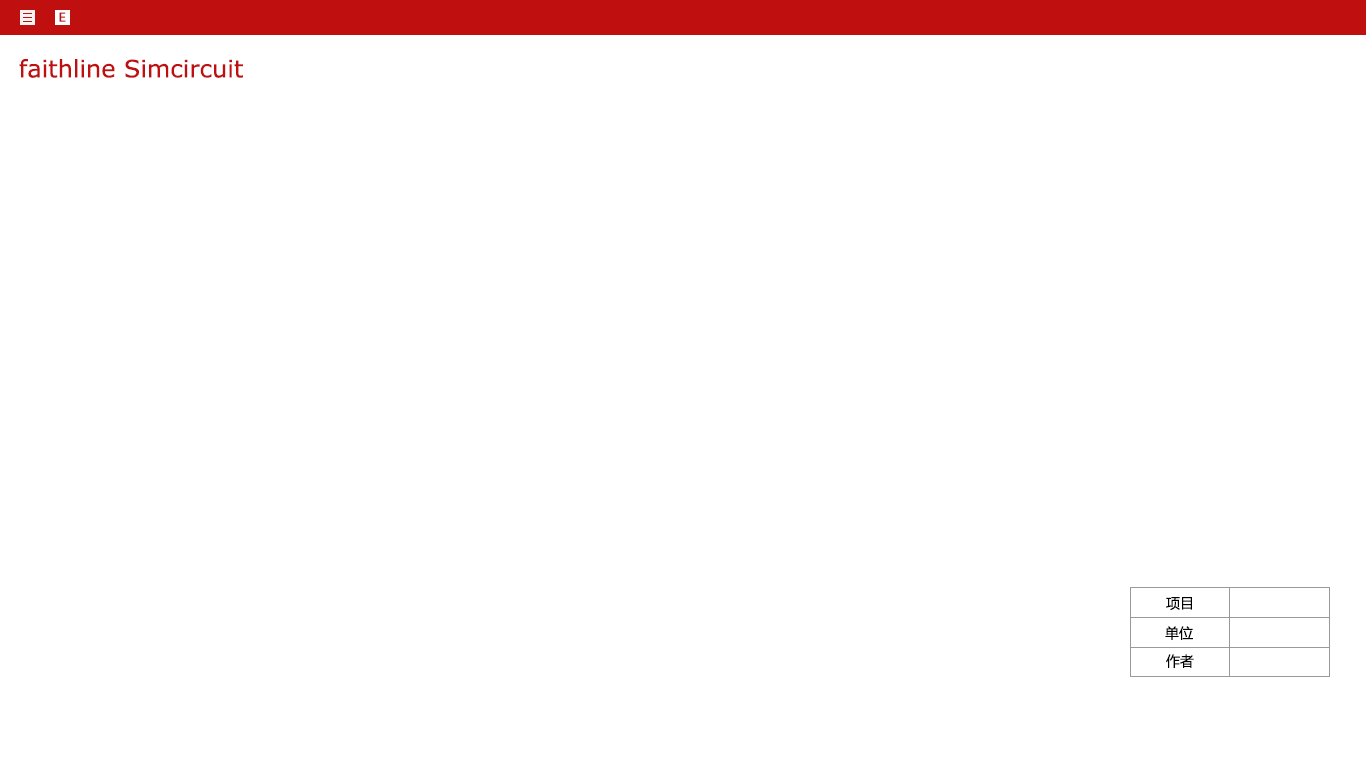
<style>
.page{position:relative;width:1366px;height:768px;background:#ffffff}
.page>*{position:absolute;margin:0}
.t1{font:24px "MSReferenceSansSerif";color:#bf0f0f}
.t2{font:14px "MicrosoftYaHei";color:#000000}
</style>
<div class="page">
<p class="t1" style="left:19px;top:59px;width:224px;height:19px">faithline Simcircuit</p>
<p class="t2" style="left:1166px;top:597px;width:26px;height:14px">项目</p>
<p class="t2" style="left:1165px;top:626px;width:28px;height:14px">单位</p>
<p class="t2" style="left:1166px;top:654px;width:28px;height:14px">作者</p>
</div>
